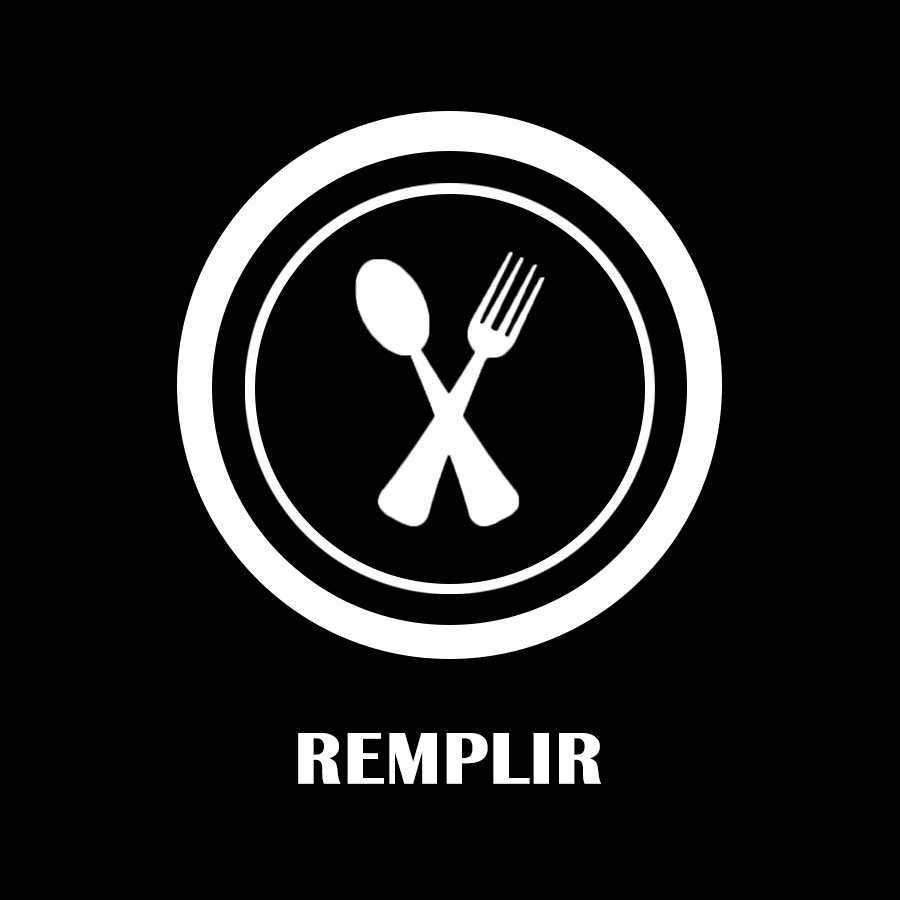
<style>
.page{position:relative;width:900px;height:900px;background:#000000}
.page>*{position:absolute;margin:0}
.t1{font:75px "BritannicBold";color:#ffffff;font-weight:bold}
</style>
<div class="page">
<p class="t1" style="left:298px;top:733px;width:303px;height:51px">REMPLIR</p>
</div>
